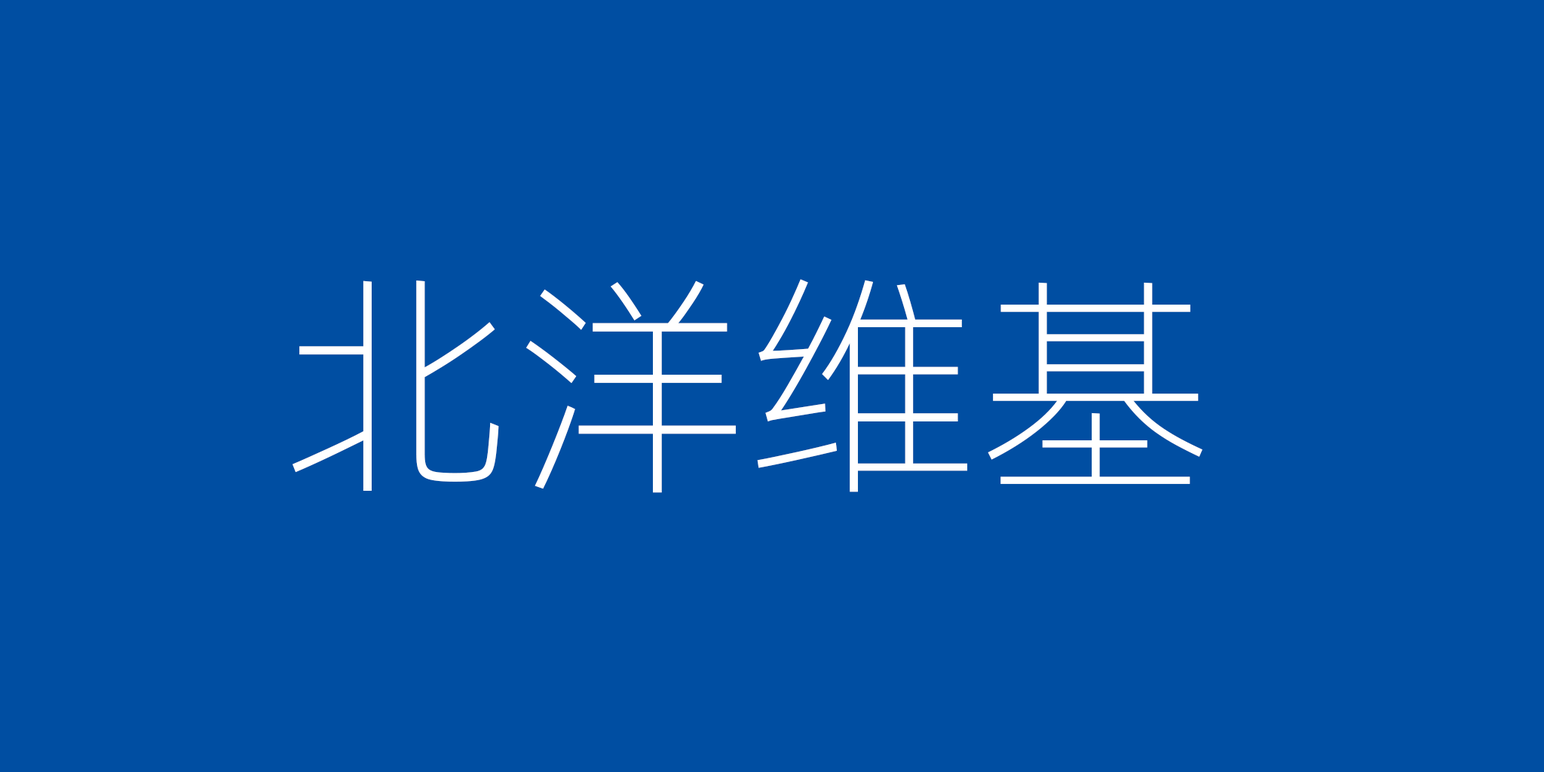
<style>
.page{position:relative;width:1544px;height:772px;background:#004ea2}
.page>*{position:absolute;margin:0}
.t1{font:236.5px "Alibaba-PuHuiTi-L";color:#ffffff}
</style>
<div class="page">
<p class="t1" style="left:293px;top:279px;width:910px;height:214px">北洋维基</p>
</div>
